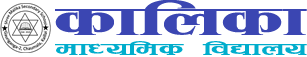
<style>
.page{position:relative;width:307px;height:57px;background:#ffffff}
.page>*{position:absolute;margin:0}
.t1{font:43.6px "CVSadhana";letter-spacing:0.005em;color:#3b46b2;scale:1.51 1}
.t2{font:21.5px "SiddhiNormal";letter-spacing:0.005em;color:#00adcc;scale:1.93 1}
</style>
<div class="page">
<p class="t1" style="left:55px;top:0px;width:252px;height:35px">sflnsf</p>
<p class="t2" style="left:55px;top:41px;width:252px;height:14px">dfWolds ljBfno</p>
</div>
